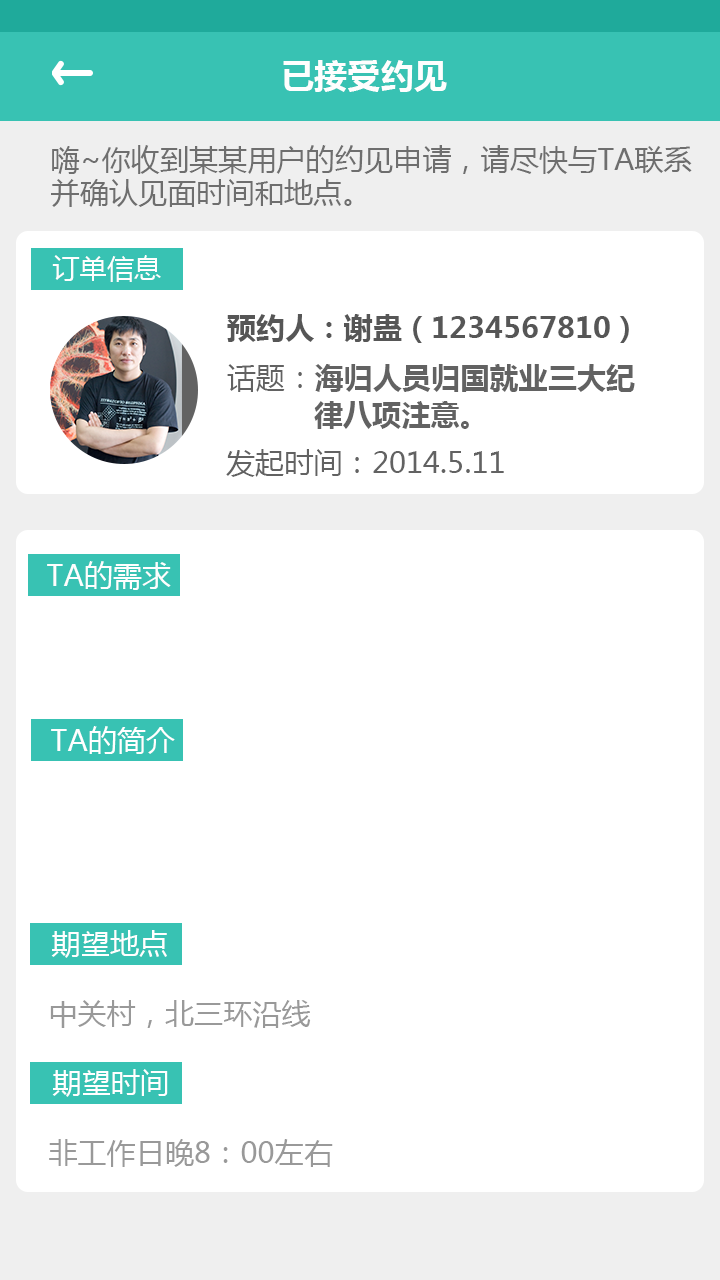
<style>
.page{position:relative;width:720px;height:1280px;background:#ffffff}
.page>*{position:absolute;margin:0}
.t1{font:33.3px "MicrosoftYaHei-Bold";color:#fefefe}
.t2{font:29.2px/33.3px "MicrosoftYaHei";color:#6e6e6e}
.t3{font:27.1px "MicrosoftYaHei";color:#fefefe}
.t4{font:29.2px "MicrosoftYaHei-Bold";color:#565656}
.t5{font:29.2px/37.5px "MicrosoftYaHei-Bold";color:#626262}
.t6{font:29.2px/37.5px "MicrosoftYaHei";color:#626262}
.t7{font:29.2px "MicrosoftYaHei";color:#626262}
.t8{font:29.2px "MicrosoftYaHei";color:#fefefe}
.t9{font:29.2px "MicrosoftYaHei";color:#ffffff}
.t10{font:29.2px "MicrosoftYaHei";color:#999999}
</style>
<div class="page">
<p class="t1" style="left:283px;top:60px;width:164px;height:32px">已接受约见</p>
<p class="t2" style="left:51px;top:145px;width:641px;height:62px">嗨~你收到某某用户的约见申请，请尽快与TA联系<br>并确认见面时间和地点。</p>
<p class="t3" style="left:52px;top:255px;width:109px;height:27px">订单信息</p>
<p class="t4" style="left:227px;top:314px;width:402px;height:29px">预约人：谢蛊（1234567810）</p>
<p class="t5" style="left:227px;top:364px;width:408px;height:65px"><span class="t6">话题：</span>海归人员归国就业三大纪<br>          律八项注意。</p>
<p class="t7" style="left:226px;top:449px;width:278px;height:28px">发起时间：2014.5.11</p>
<p class="t8" style="left:47px;top:561px;width:124px;height:29px">TA的需求</p>
<p class="t9" style="left:51px;top:726px;width:124px;height:28px">TA的简介</p>
<p class="t9" style="left:51px;top:930px;width:116px;height:28px">期望地点</p>
<p class="t10" style="left:50px;top:1000px;width:261px;height:28px">中关村，北三环沿线</p>
<p class="t9" style="left:52px;top:1069px;width:116px;height:28px">期望时间</p>
<p class="t10" style="left:49px;top:1139px;width:284px;height:28px">非工作日晚8：00左右</p>
</div>
